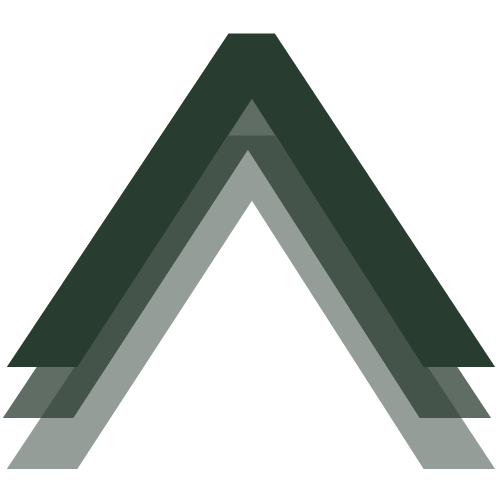
<style>
.page{position:relative;width:500px;height:500px;background:#ffffff}
.page>*{position:absolute;margin:0}
.t1{font:473.7px "PirulenRg-Regular";letter-spacing:-0.02em;color:#293c30}
.t2{font:473.7px "PirulenRg-Regular";letter-spacing:-0.02em}
</style>
<div class="page">
<p class="t1" style="left:7px;top:33px;width:488px;height:334px">a</p>
<p class="t1" style="left:7px;top:33px;width:488px;height:334px">a</p>
<p class="t2" style="left:3px;top:84px;width:488px;height:334px">a</p>
<p class="t2" style="left:3px;top:84px;width:488px;height:334px">a</p>
<p class="t2" style="left:7px;top:135px;width:488px;height:334px">a</p>
<p class="t2" style="left:7px;top:135px;width:488px;height:334px">a</p>
</div>
